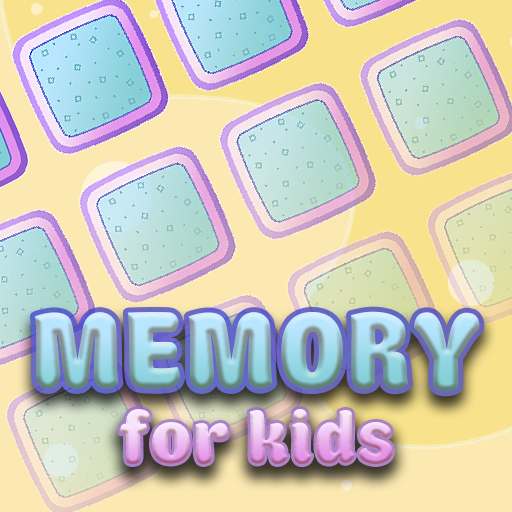
<style>
.page{position:relative;width:512px;height:512px}
.page>*{position:absolute;margin:0}
.t1{font:120px "Boomboom";letter-spacing:0.025em}
.t2{font:80px "Boomboom";letter-spacing:0.025em}
</style>
<div class="page">
<p class="t1" style="left:34px;top:311px;width:446px;height:81px">MEMORY</p>
<p class="t2" style="left:120px;top:409px;width:273px;height:55px">for kids</p>
</div>
